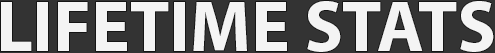
<style>
.page{position:relative;width:495px;height:53px;background:#f4f4f4}
.page>*{position:absolute;margin:0}
.t1{font:72px "MyriadHebrew-Bold";color:#f4f4f4}
</style>
<div class="page">
<p class="t1" style="left:1px;top:1px;width:493px;height:51px">LIFETIME STATS</p>
</div>
